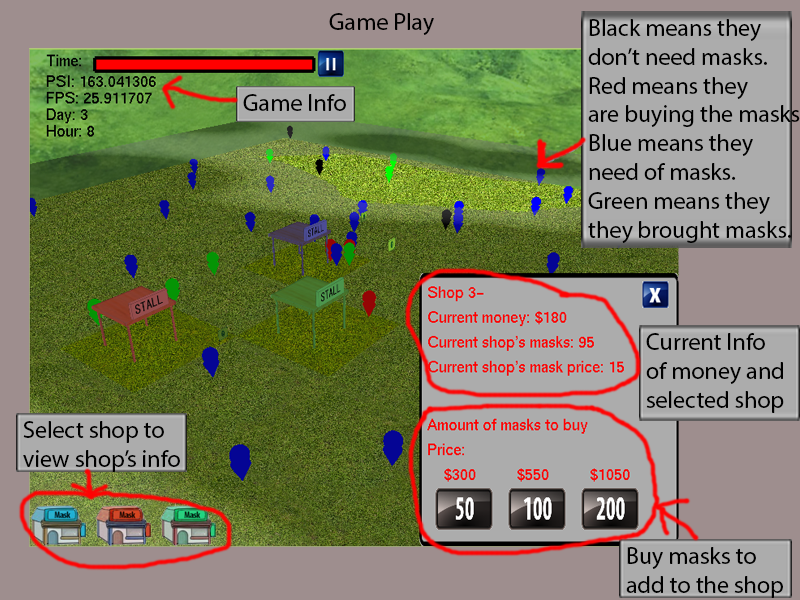
<style>
.page{position:relative;width:800px;height:600px;background:#9e8e8e}
.page>*{position:absolute;margin:0}
.t1{font:24px "MyriadPro-Regular";color:#000000}
</style>
<div class="page">
<p class="t1" style="left:329px;top:13px;width:105px;height:22px">Game Play</p>
<p class="t1" style="left:588px;top:19px;width:212px;height:224px">Black means they<br>don’t need masks.<br>Red means they<br>are buying the masks<br>Blue means they<br>need of masks.<br>Green means they<br>they brought masks.</p>
<p class="t1" style="left:243px;top:94px;width:103px;height:17px">Game Info</p>
<p class="t1" style="left:646px;top:333px;width:138px;height:80px">Current Info<br>of money and <br>selected shop</p>
<p class="t1" style="left:23px;top:421px;width:157px;height:51px">Select shop to<br>view shop’s info</p>
<p class="t1" style="left:626px;top:547px;width:157px;height:51px">Buy masks to<br>add to the shop</p>
</div>
